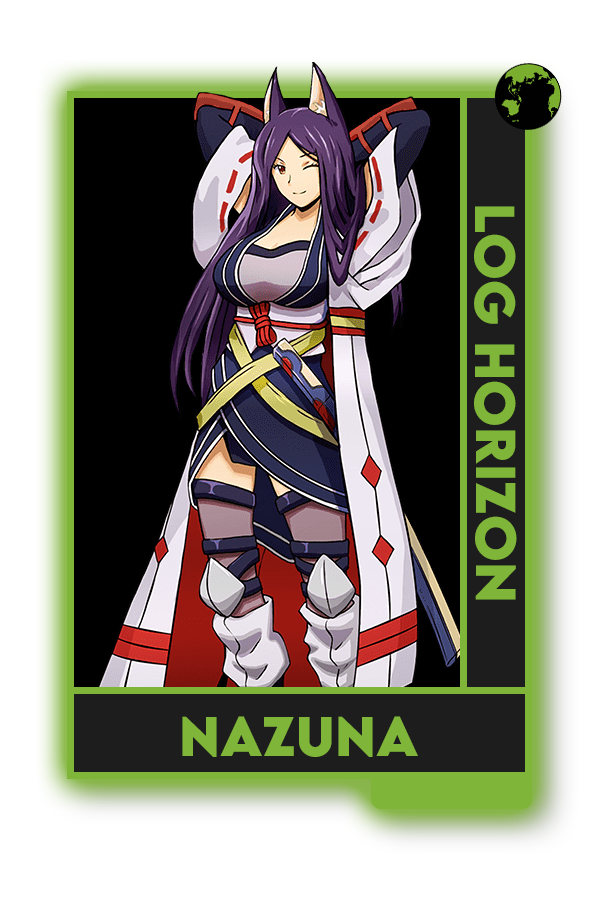
<style>
.page{position:relative;width:600px;height:900px;background:#ffffff}
.page>*{position:absolute;margin:0}
.t1{font:50px "LEMONMILK-Bold";color:#7fad41}
</style>
<div class="page">
<p class="t1" style="left:474px;top:206px;width:43px;height:394px;rotate:90deg">Log Horizon</p>
<p class="t1" style="left:182px;top:716px;width:236px;height:41px">Nazuna</p>
</div>
